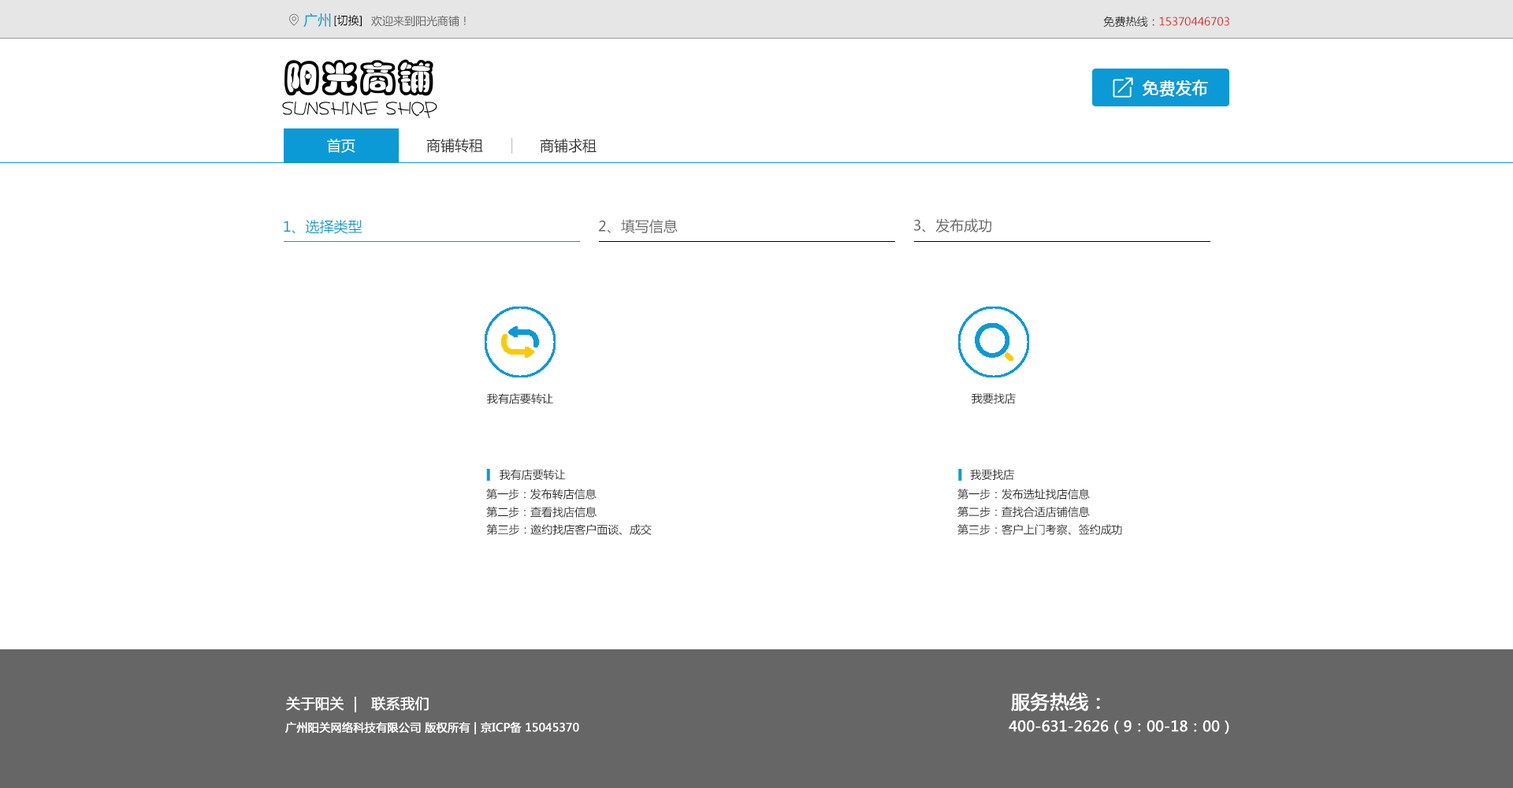
<style>
.page{position:relative;width:1513px;height:788px;background:#ffffff}
.page>*{position:absolute;margin:0}
.t1{font:14.2px "MicrosoftYaHei";color:#0b9ad6}
.t2{font:11px "MicrosoftYaHei";color:#000000}
.t3{font:11px "MicrosoftYaHei";color:#666666}
.t4{font:11px "MicrosoftYaHei";color:#e22222}
.t5{font:11px "MicrosoftYaHei";color:#333333}
.t6{font:16.2px "MicrosoftYaHei";color:#ffffff;text-transform:uppercase;font-weight:bold}
.t7{font:14.5px "MicrosoftYaHei";color:#0b9ad6}
.t8{font:14.5px "MicrosoftYaHei";color:#333232}
.t9{font:14.5px "MicrosoftYaHei";color:#ccc8c8}
.t10{font:14.2px "MicrosoftYaHei";color:#ffffff}
.t11{font:14.2px "MicrosoftYaHei";color:#666666}
.t12{font:10.7px "MicrosoftYaHei";color:#333333}
.t13{font:10.8px "MicrosoftYaHei";color:#333333}
.t14{font:11.1px "MicrosoftYaHei";color:#333333}
.t15{font:14.2px "MicrosoftYaHei";color:#fefefe;text-transform:uppercase;font-weight:bold}
.t16{font:18.9px "MicrosoftYaHei";color:#ffffff;text-transform:uppercase;font-weight:bold}
.t17{font:11px "MicrosoftYaHei";color:#ffffff;text-transform:uppercase;font-weight:bold}
.t18{font:14.2px "MicrosoftYaHei";color:#ffffff;text-transform:uppercase;font-weight:bold}
</style>
<div class="page">
<p class="t1" style="left:303px;top:13px;width:28px;height:15px">广州</p>
<p class="t2" style="left:334px;top:15px;width:28px;height:12px">[切换]</p>
<p class="t3" style="left:371px;top:15px;width:95px;height:12px">欢迎来到阳光商铺！</p>
<p class="t4" style="left:1103px;top:16px;width:126px;height:12px"><span class="t5">免费热线：</span>15370446703</p>
<p class="t6" style="left:1143px;top:80px;width:65px;height:17px">免费发布</p>
<p class="t1" style="left:397px;top:137px;width:3px;height:16px">|</p>
<p class="t7" style="left:397px;top:137px;width:3px;height:16px">|</p>
<p class="t8" style="left:426px;top:138px;width:57px;height:15px">商铺转租</p>
<p class="t9" style="left:511px;top:138px;width:2px;height:16px">|</p>
<p class="t10" style="left:327px;top:139px;width:28px;height:14px">首页</p>
<p class="t8" style="left:540px;top:139px;width:57px;height:14px">商铺求租</p>
<p class="t1" style="left:284px;top:219px;width:79px;height:15px">1、选择类型</p>
<p class="t11" style="left:599px;top:219px;width:79px;height:14px">2、填写信息</p>
<p class="t11" style="left:914px;top:218px;width:77px;height:14px">3、发布成功</p>
<p class="t12" style="left:487px;top:393px;width:66px;height:11px">我有店要转让</p>
<p class="t13" style="left:972px;top:392px;width:44px;height:12px">我要找店</p>
<p class="t14" style="left:500px;top:469px;width:66px;height:12px">我有店要转让</p>
<p class="t14" style="left:970px;top:469px;width:44px;height:12px">我要找店</p>
<p class="t14" style="left:486px;top:489px;width:111px;height:11px">第一步：发布转店信息</p>
<p class="t14" style="left:958px;top:489px;width:132px;height:11px">第一步：发布选址找店信息</p>
<p class="t14" style="left:486px;top:507px;width:111px;height:11px">第二步：查看找店信息</p>
<p class="t14" style="left:958px;top:506px;width:132px;height:12px">第二步：查找合适店铺信息</p>
<p class="t14" style="left:486px;top:524px;width:166px;height:11px">第三步：邀约找店客户面谈、成交</p>
<p class="t14" style="left:958px;top:524px;width:164px;height:11px">第三步：客户上门考察、签约成功</p>
<p class="t15" style="left:286px;top:697px;width:143px;height:15px">关于阳关  |   联系我们</p>
<p class="t16" style="left:1011px;top:692px;width:89px;height:20px">服务热线：</p>
<p class="t17" style="left:285px;top:722px;width:294px;height:12px">广州阳关网络科技有限公司 版权所有 | 京ICP备 15045370</p>
<p class="t18" style="left:1009px;top:720px;width:220px;height:14px">400-631-2626（9：00-18：00）</p>
</div>
